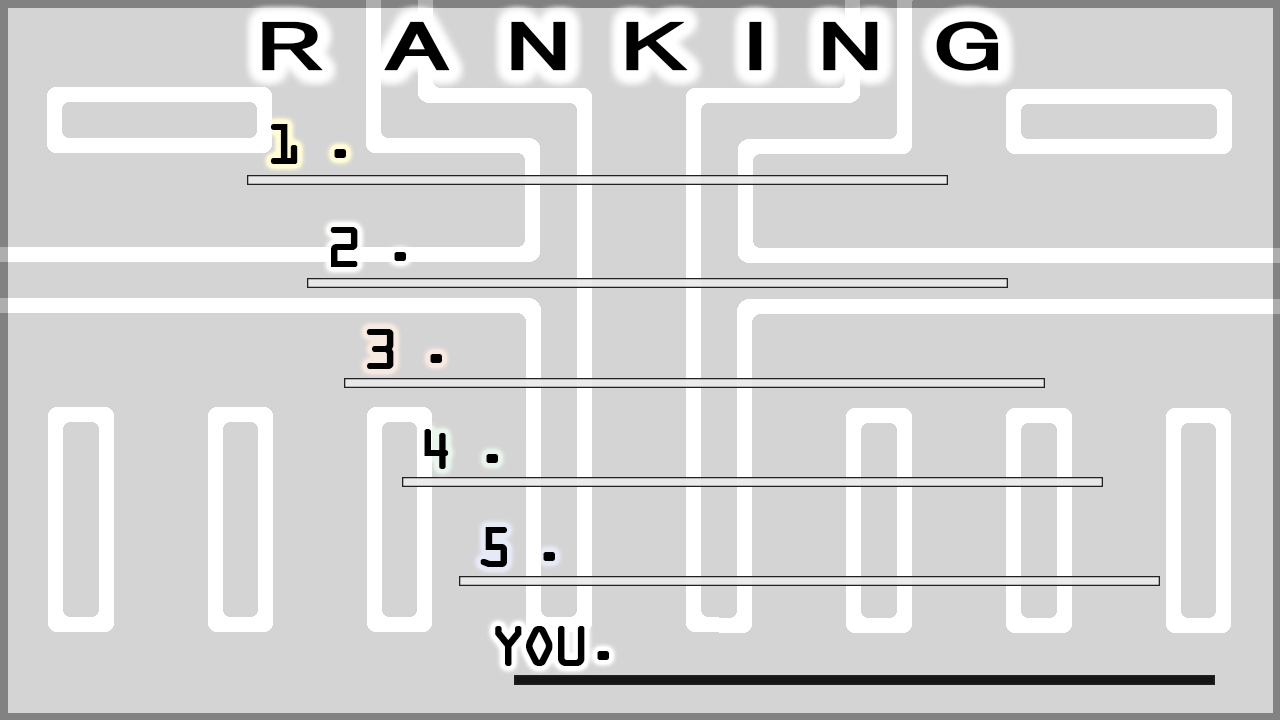
<style>
.page{position:relative;width:1280px;height:720px;background:#d4d4d4}
.page>*{position:absolute;margin:0}
.t1{font:60px "HGPGothicE";letter-spacing:0.4em;color:#000000;font-weight:bold;scale:1.89 1}
.t2{font:60px "OCRAExtended";letter-spacing:0.3em;color:#000000;font-weight:bold}
.t3{font:60px "OCRAExtended";letter-spacing:-0.1em;color:#000000;font-weight:bold}
</style>
<div class="page">
<p class="t1" style="left:262px;top:21px;width:737px;height:50px">RANKING</p>
<p class="t2" style="left:270px;top:124px;width:76px;height:40px">1.</p>
<p class="t2" style="left:330px;top:227px;width:76px;height:40px">2.</p>
<p class="t2" style="left:366px;top:329px;width:76px;height:40px">3.</p>
<p class="t2" style="left:424px;top:429px;width:74px;height:40px">4.</p>
<p class="t2" style="left:480px;top:527px;width:75px;height:40px">5.</p>
<p class="t3" style="left:495px;top:626px;width:114px;height:40px">YOU<span class="t2">.</span></p>
</div>
